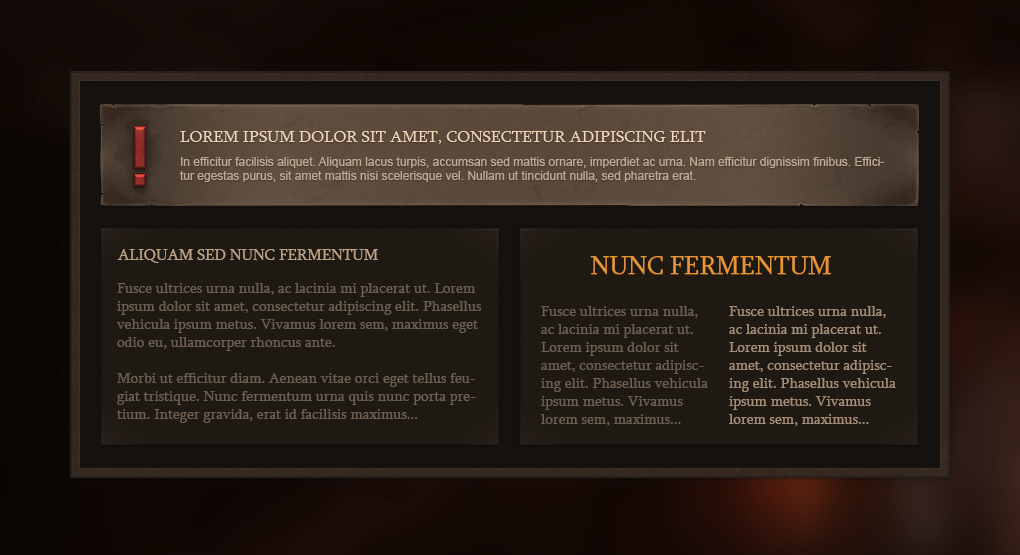
<style>
.page{position:relative;width:1020px;height:555px;background:#1f1914}
.page>*{position:absolute;margin:0}
.t1{font:76px "System";text-transform:uppercase}
.t2{font:17px "Sylfaen";color:#f1d5b9;text-transform:uppercase}
.t3{font:12px "ArialMT";color:#c0ab97}
.t4{font:16px "Sylfaen";color:#bea286;text-transform:uppercase}
.t5{font:26px "Sylfaen";color:#e59639;text-transform:uppercase}
.t6{font:15px "Sylfaen";color:#6c5e50}
.t7{font:15px "Sylfaen";color:#a58d76}
</style>
<div class="page">
<p class="t1" style="left:134px;top:126px;width:12px;height:60px">!</p>
<p class="t2" style="left:180px;top:131px;width:526px;height:13px">Lorem ipsum dolor sit amet, consectetur adipiscing elit</p>
<p class="t3" style="left:180px;top:157px;width:704px;height:25px">In efficitur facilisis aliquet. Aliquam lacus turpis, accumsan sed mattis ornare, imperdiet ac urna. Nam efficitur dignissim finibus. Efficitur egestas purus, sit amet mattis nisi scelerisque vel. Nullam ut tincidunt nulla, sed pharetra erat.</p>
<p class="t4" style="left:117px;top:249px;width:261px;height:14px">Aliquam sed nunc fermentum</p>
<p class="t5" style="left:590px;top:256px;width:241px;height:18px">nunc fermentum</p>
<p class="t6" style="left:116px;top:283px;width:366px;height:140px">Fusce ultrices urna nulla, ac lacinia mi placerat ut. Lorem ipsum dolor sit amet, consectetur adipiscing elit. Phasellus vehicula ipsum metus. Vivamus lorem sem, maximus eget odio eu, ullamcorper rhoncus ante. <br><br>Morbi ut efficitur diam. Aenean vitae orci eget tellus feugiat tristique. Nunc fermentum urna quis nunc porta pretium. Integer gravida, erat id facilisis maximus...</p>
<p class="t6" style="left:541px;top:306px;width:167px;height:120px">Fusce ultrices urna nulla, ac lacinia mi placerat ut. Lorem ipsum dolor sit amet, consectetur adipiscing elit. Phasellus vehicula ipsum metus. Vivamus lorem sem, maximus...</p>
<p class="t7" style="left:729px;top:306px;width:167px;height:120px">Fusce ultrices urna nulla, ac lacinia mi placerat ut. Lorem ipsum dolor sit amet, consectetur adipiscing elit. Phasellus vehicula ipsum metus. Vivamus lorem sem, maximus...</p>
</div>
